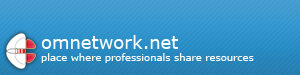
<style>
.page{position:relative;width:300px;height:75px}
.page>*{position:absolute;margin:0}
.t1{font:10px "Verdana";color:#ffffff}
.t2{font:18px "Verdana";color:#ffffff}
</style>
<div class="page">
<p class="t1" style="left:41px;top:35px;width:213px;height:28px"><span class="t2">omnetwork.net<br></span>place where professionals share resources</p>
</div>
